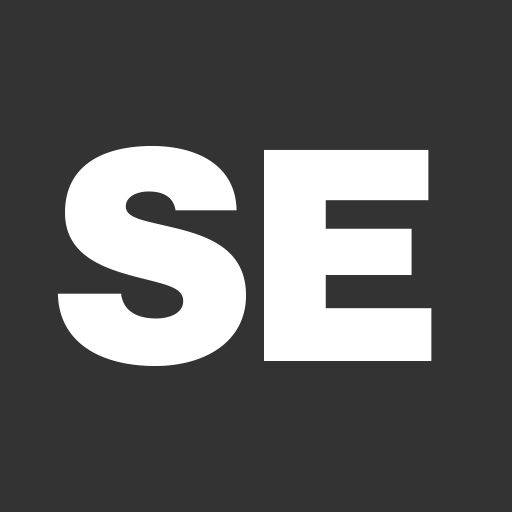
<style>
.page{position:relative;width:512px;height:512px;background:#333333}
.page>*{position:absolute;margin:0}
.t1{font:295px "NHaasGroteskDSPro-95Blk";color:#ffffff}
</style>
<div class="page">
<p class="t1" style="left:57px;top:146px;width:375px;height:220px">SE</p>
</div>
